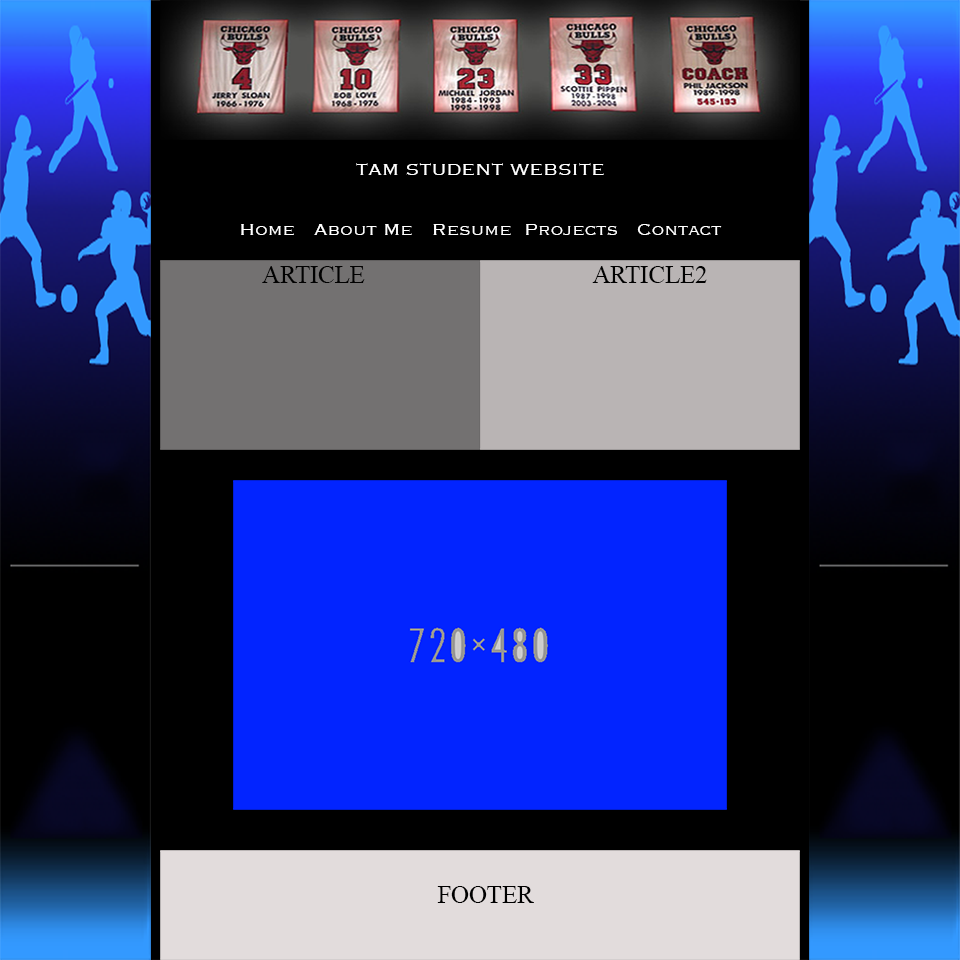
<style>
.page{position:relative;width:960px;height:960px;background:#000000}
.page>*{position:absolute;margin:0}
.t1{font:20.6px "Copperplate-Light";color:#ffffff}
.t2{font:24.7px "TimesNewRomanPSMT";color:#010101}
.t3{font:24.7px "TimesNewRomanPSMT";color:#000000}
</style>
<div class="page">
<p class="t1" style="left:356px;top:163px;width:248px;height:12px">TAM STUDENT WEBSITE</p>
<p class="t1" style="left:241px;top:224px;width:481px;height:11px">Home   About Me   Resume  Projects   Contact</p>
<p class="t2" style="left:262px;top:266px;width:103px;height:17px">ARTICLE</p>
<p class="t2" style="left:592px;top:266px;width:115px;height:17px">ARTICLE2</p>
<p class="t3" style="left:437px;top:886px;width:97px;height:17px">FOOTER</p>
</div>
